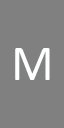
<style>
.page{position:relative;width:64px;height:128px;background:#808080}
.page>*{position:absolute;margin:0}
.t1{font:50px "Calibri";color:#feffff}
</style>
<div class="page">
<p class="t1" style="left:15px;top:48px;width:35px;height:32px">M</p>
</div>
